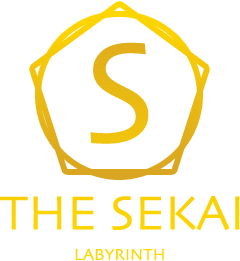
<style>
.page{position:relative;width:240px;height:261px;background:#ffffff}
.page>*{position:absolute;margin:0}
.t1{font:150.3px "Skia-Regular";color:#e8b814}
.t2{font:50.1px "Skia-Regular";color:#ffd700}
.t3{font:16.7px "Skia-Regular";color:#ffd700}
</style>
<div class="page">
<p class="t1" style="left:90px;top:42px;width:59px;height:102px">S</p>
<p class="t2" style="left:0px;top:196px;width:240px;height:35px">THE SEKAI</p>
<p class="t3" style="left:75px;top:248px;width:89px;height:13px">LABYRINTH</p>
</div>
